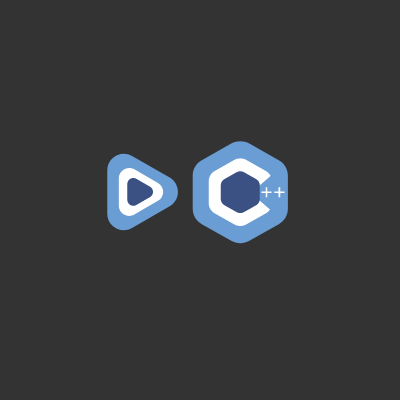
<style>
.page{position:relative;width:400px;height:400px;background:#333333}
.page>*{position:absolute;margin:0}
.t1{font:24px "Electrolize-Regular";color:#ffffff}
</style>
<div class="page">
<p class="t1" style="left:261px;top:187px;width:24px;height:11px">++</p>
</div>
